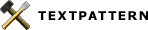
<style>
.page{position:relative;width:148px;height:30px;background:#ffffff}
.page>*{position:absolute;margin:0}
.t1{font:12px "Verdana-Bold";letter-spacing:0.13em;color:#000000}
</style>
<div class="page">
<p class="t1" style="left:38px;top:11px;width:110px;height:9px">TEXTPATTERN</p>
</div>
